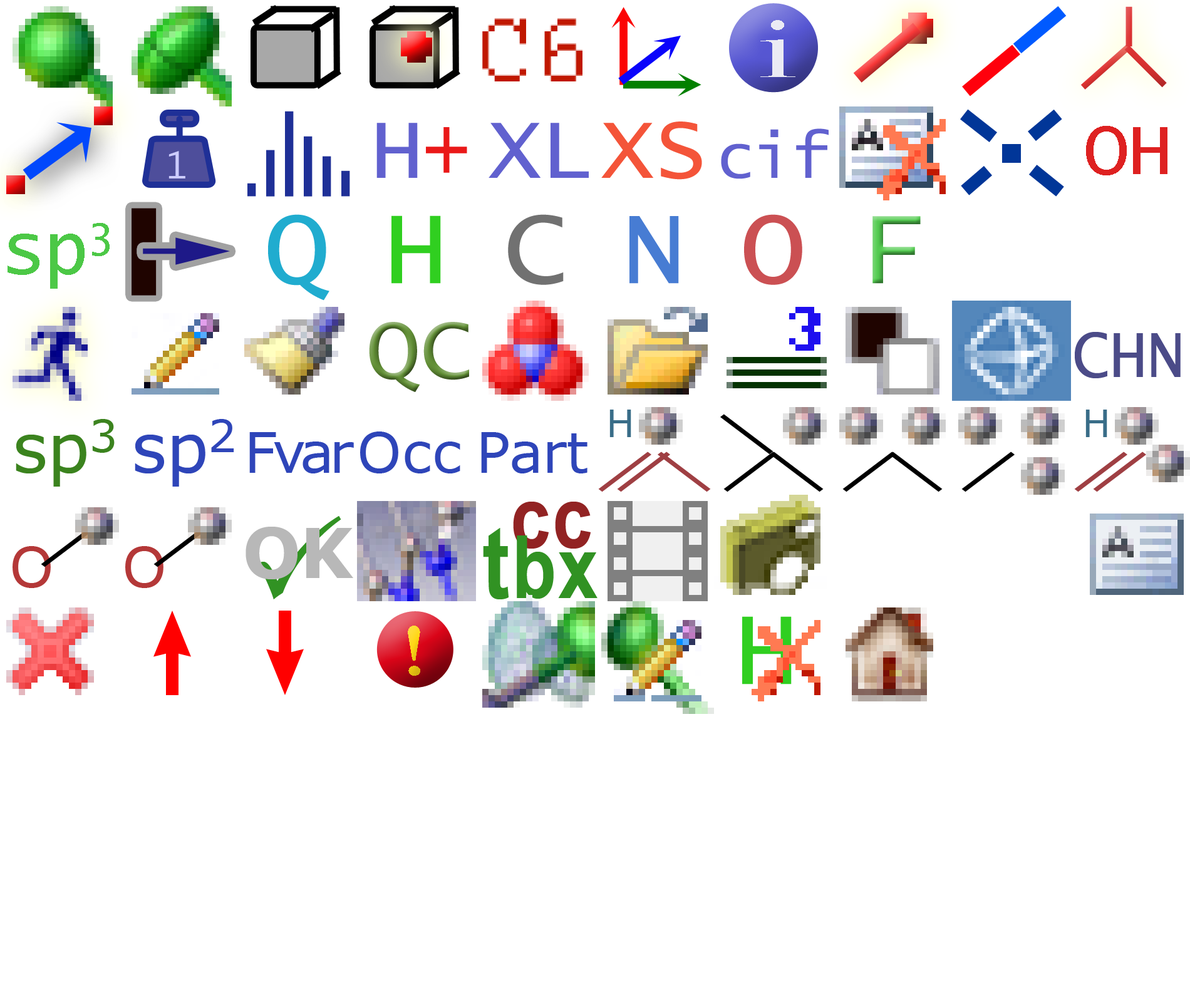
<style>
.page{position:relative;width:1190px;height:1002px;background:#ffffff}
.page>*{position:absolute;margin:0}
.t1{font:100.2px "Courier";color:#c01800}
.t2{font:87.7px "Modern-Regular";letter-spacing:0.06em;color:#ebebf4;scale:1.36 1}
.t3{font:87.7px "LucidaConsole";color:#6161cf}
.t4{font:87.7px "LucidaConsole";color:#f45439}
.t5{font:75.2px "LucidaConsole";letter-spacing:-0.005em;color:#de2121}
.t6{font:87.7px "LucidaConsole";letter-spacing:-0.005em;color:#ea1818;scale:0.9 1}
.t7{font:62.6px "LucidaConsole";color:#6161cf}
.t8{font:37.6px "LucidaConsole";letter-spacing:-0.005em;color:#ccccff;scale:0.9 1}
.t9{font:106.5px "LucidaConsole";letter-spacing:-0.025em;color:#20accf;font-weight:bold}
.t10{font:106.5px "LucidaConsole";letter-spacing:-0.025em;color:#30cf20;font-weight:bold}
.t11{font:106.5px "LucidaConsole";letter-spacing:-0.025em;color:#717171;font-weight:bold}
.t12{font:106.5px "LucidaConsole";letter-spacing:-0.025em;color:#477cd3;font-weight:bold}
.t13{font:106.5px "LucidaConsole";letter-spacing:-0.025em;color:#cb5053;font-weight:bold}
.t14{font:106.5px "LucidaConsole";letter-spacing:-0.025em;font-weight:bold}
.t15{font:75.2px "LucidaConsole";letter-spacing:-0.005em;color:#4cc846}
.t16{font:87.7px "LucidaConsole"}
.t17{font:70px "LucidaConsole";letter-spacing:-0.005em;color:#4b4b88;scale:0.9 1}
.t18{font:37.6px "Verdana";letter-spacing:0.01em;color:#396d88}
.t19{font:67.4px "Verdana";color:#3b831e}
.t20{font:67.4px "Verdana";letter-spacing:-0.01em;color:#3b831e}
.t21{font:77.8px "Verdana";letter-spacing:-0.01em;color:#3b831e}
.t22{font:67.4px "Verdana";color:#2e45b9}
.t23{font:67.4px "Verdana";letter-spacing:-0.01em;color:#2e45b9}
.t24{font:77.8px "Verdana";letter-spacing:-0.01em;color:#2e45b9}
.t25{font:56.4px "Verdana";letter-spacing:-0.08em;color:#2e45b9}
.t26{font:56.4px "Verdana";letter-spacing:0.01em;color:#2e45b9}
.t27{font:56.4px "Verdana";letter-spacing:-0.01em;color:#2e45b9}
.t28{font:87.7px/50.1px "ArialNarrow-Bold";letter-spacing:0.025em;color:#922323}
.t29{font:100.2px/50.1px "ArialNarrow-Bold";letter-spacing:0.025em;color:#319223}
.t30{font:87.7px/50.1px "ArialNarrow-Bold";letter-spacing:0.025em;color:#319223}
.t31{font:68.9px "Verdana-Bold";letter-spacing:-0.013em;color:#b8b8b8}
.t32{font:56.4px "Verdana";letter-spacing:-0.005em;color:#b43838}
.t33{font:61.9px "Asimov";letter-spacing:0.05em;color:#ffd614;scale:1.17 1}
</style>
<div class="page">
<p class="t1" style="left:482px;top:18px;width:100px;height:63px">C6</p>
<p class="t2" style="left:760px;top:20px;width:35px;height:57px">i</p>
<p class="t3" style="left:376px;top:123px;width:42px;height:55px">H</p>
<p class="t3" style="left:489px;top:123px;width:100px;height:55px">XL</p>
<p class="t4" style="left:601px;top:122px;width:101px;height:58px">XS</p>
<p class="t5" style="left:1086px;top:126px;width:81px;height:49px">OH</p>
<p class="t6" style="left:426px;top:127px;width:41px;height:46px">+</p>
<p class="t7" style="left:721px;top:128px;width:108px;height:51px">cif</p>
<p class="t8" style="left:168px;top:151px;width:17px;height:27px">1</p>
<p class="t9" style="left:268px;top:214px;width:61px;height:87px">Q</p>
<p class="t10" style="left:391px;top:215px;width:50px;height:69px">H</p>
<p class="t11" style="left:508px;top:214px;width:56px;height:71px">C</p>
<p class="t12" style="left:629px;top:216px;width:50px;height:68px">N</p>
<p class="t13" style="left:744px;top:214px;width:58px;height:71px">O</p>
<p class="t14" style="left:872px;top:216px;width:49px;height:68px">F</p>
<p class="t15" style="left:8px;top:223px;width:102px;height:66px">sp3</p>
<p class="t16" style="left:369px;top:322px;width:100px;height:70px">QC</p>
<p class="t17" style="left:1075px;top:332px;width:106px;height:46px">CHN</p>
<p class="t18" style="left:609px;top:410px;width:22px;height:27px">H</p>
<p class="t18" style="left:1085px;top:410px;width:22px;height:27px">H</p>
<p class="t19" style="left:16px;top:419px;width:99px;height:68px">s<span class="t20">p</span><span class="t21">3</span></p>
<p class="t22" style="left:135px;top:419px;width:99px;height:68px">s<span class="t23">p</span><span class="t24">2</span></p>
<p class="t25" style="left:249px;top:432px;width:105px;height:41px">Fvar</p>
<p class="t26" style="left:360px;top:432px;width:100px;height:41px">Occ</p>
<p class="t27" style="left:481px;top:432px;width:106px;height:41px"><span class="t26">P</span>ar<span class="t26">t</span></p>
<p class="t28" style="left:483px;top:502px;width:114px;height:97px;text-align:center">cc<br><span class="t29">t</span><span class="t30">bx</span></p>
<p class="t31" style="left:246px;top:527px;width:107px;height:52px">OK</p>
<p class="t32" style="left:13px;top:546px;width:38px;height:42px">O</p>
<p class="t32" style="left:125px;top:546px;width:38px;height:42px">O</p>
<p class="t10" style="left:742px;top:616px;width:50px;height:69px">H</p>
<p class="t33" style="left:408px;top:626px;width:12px;height:50px">!</p>
</div>
